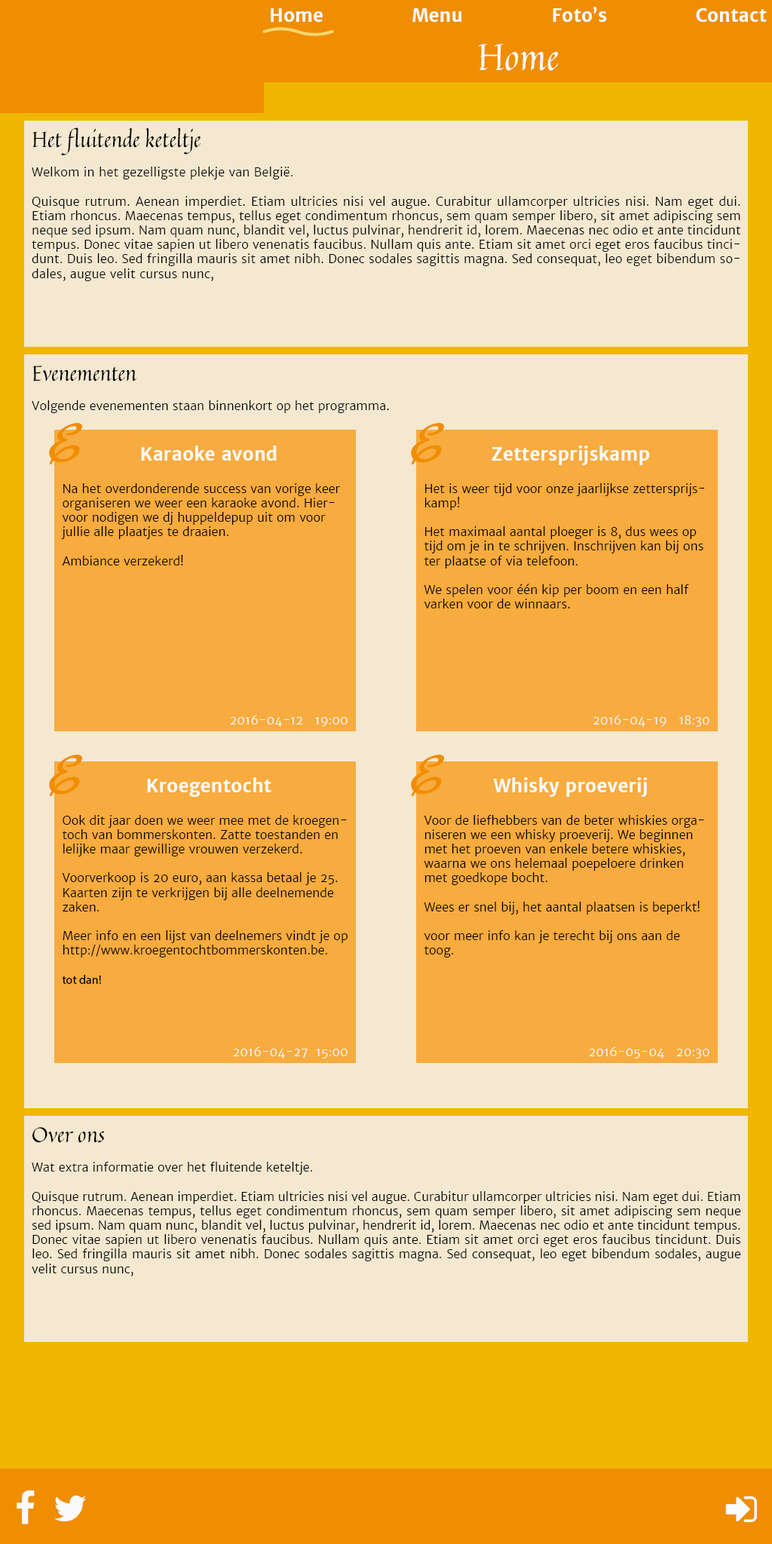
<style>
.page{position:relative;width:772px;height:1544px;background:#f4e8d0}
.page>*{position:absolute;margin:0}
.t1{font:18.1px "MerriweatherSans-Bold";color:#fafafa}
.t2{font:36.2px "Quintessential-Regular";color:#fafafa}
.t3{font:21.1px "Quintessential-Regular";color:#000000}
.t4{font:12.1px "MerriweatherSans-Light";letter-spacing:0.01em;color:#000000}
.t5{font:12.1px "MerriweatherSans-Light";color:#000000}
.t6{font:54.3px "MarckScript-Regular";color:#f08d00}
.t7{font:12.1px "MerriweatherSans-Light";color:#fafafa}
.t8{font:12.1px "MyriadPro-Regular";color:#000000}
</style>
<div class="page">
<p class="t1" style="left:271px;top:6px;width:496px;height:16px">Home               Menu               Foto’s               Contact</p>
<p class="t2" style="left:478px;top:44px;width:80px;height:27px">Home</p>
<p class="t3" style="left:32px;top:127px;width:169px;height:28px">Het fluitende keteltje</p>
<p class="t4" style="left:32px;top:167px;width:709px;height:114px">Welkom in het gezelligste plekje van België.<br><br>Quisque rutrum. Aenean imperdiet. Etiam ultricies nisi vel augue. Curabitur ullamcorper ultricies nisi. Nam eget dui. Etiam rhoncus. Maecenas tempus, tellus eget condimentum rhoncus, sem quam semper libero, sit amet adipiscing sem neque sed ipsum. Nam quam nunc, blandit vel, luctus pulvinar, hendrerit id, lorem. Maecenas nec odio et ante tincidunt tempus. Donec vitae sapien ut libero venenatis faucibus. Nullam quis ante. Etiam sit amet orci eget eros faucibus tincidunt. Duis leo. Sed fringilla mauris sit amet nibh. Donec sodales sagittis magna. Sed consequat, leo eget bibendum sodales, augue velit cursus nunc,</p>
<p class="t3" style="left:32px;top:366px;width:104px;height:16px">Evenementen</p>
<p class="t5" style="left:32px;top:400px;width:357px;height:13px">Volgende evenementen staan binnenkort op het programma.</p>
<p class="t6" style="left:49px;top:423px;width:33px;height:42px">E</p>
<p class="t6" style="left:411px;top:423px;width:33px;height:42px">E</p>
<p class="t1" style="left:141px;top:446px;width:136px;height:15px">Karaoke avond</p>
<p class="t1" style="left:492px;top:446px;width:158px;height:19px">Zettersprijskamp</p>
<p class="t5" style="left:61px;top:483px;width:279px;height:83px">Na het overdonderende success van vorige keer organiseren we weer een karaoke avond. Hiervoor nodigen we dj huppeldepup uit om voor jullie alle plaatjes te draaien.<br><br>Ambiance verzekerd!</p>
<p class="t5" style="left:424px;top:483px;width:281px;height:126px">Het is weer tijd voor onze jaarlijkse zettersprijskamp!<br><br>Het maximaal aantal ploeger is 8, dus wees op tijd om je in te schrijven. Inschrijven kan bij ons ter plaatse of via telefoon.<br><br>We spelen voor één kip per boom en een half varken voor de winnaars.</p>
<p class="t7" style="left:230px;top:715px;width:118px;height:12px">2016-04-12   19:00</p>
<p class="t7" style="left:593px;top:715px;width:117px;height:12px">2016-04-19   18:30</p>
<p class="t6" style="left:49px;top:755px;width:33px;height:42px">E</p>
<p class="t6" style="left:411px;top:755px;width:33px;height:42px">E</p>
<p class="t1" style="left:147px;top:777px;width:124px;height:20px">Kroegentocht</p>
<p class="t1" style="left:493px;top:777px;width:154px;height:20px">Whisky proeverij</p>
<p class="t5" style="left:62px;top:815px;width:286px;height:169px">Ook dit jaar doen we weer mee met de kroegentoch van bommerskonten. Zatte toestanden en lelijke maar gewillige vrouwen verzekerd.<br><br>Voorverkoop is 20 euro, aan kassa betaal je 25. Kaarten zijn te verkrijgen bij alle deelnemende zaken.<br><br>Meer info en een lijst van deelnemers vindt je op http://www.kroegentochtbommerskonten.be.<br><span class="t8"><br>tot dan!</span></p>
<p class="t5" style="left:424px;top:815px;width:280px;height:143px">Voor de liefhebbers van de beter whiskies organiseren we een whisky proeverij. We beginnen met het proeven van enkele betere whiskies, waarna we ons helemaal poepeloere drinken met goedkope bocht.<br><br>Wees er snel bij, het aantal plaatsen is beperkt!<br><br>voor meer info kan je terecht bij ons aan de toog.</p>
<p class="t7" style="left:233px;top:1047px;width:115px;height:12px">2016-04-27  15:00</p>
<p class="t7" style="left:589px;top:1047px;width:121px;height:12px">2016-05-04   20:30</p>
<p class="t3" style="left:32px;top:1127px;width:73px;height:16px">Over ons</p>
<p class="t5" style="left:32px;top:1162px;width:709px;height:115px">Wat extra informatie over het fluitende keteltje.<br><br>Quisque rutrum. Aenean imperdiet. Etiam ultricies nisi vel augue. Curabitur ullamcorper ultricies nisi. Nam eget dui. Etiam rhoncus. Maecenas tempus, tellus eget condimentum rhoncus, sem quam semper libero, sit amet adipiscing sem neque sed ipsum. Nam quam nunc, blandit vel, luctus pulvinar, hendrerit id, lorem. Maecenas nec odio et ante tincidunt tempus. Donec vitae sapien ut libero venenatis faucibus. Nullam quis ante. Etiam sit amet orci eget eros faucibus tincidunt. Duis leo. Sed fringilla mauris sit amet nibh. Donec sodales sagittis magna. Sed consequat, leo eget bibendum sodales, augue velit cursus nunc,</p>
</div>
